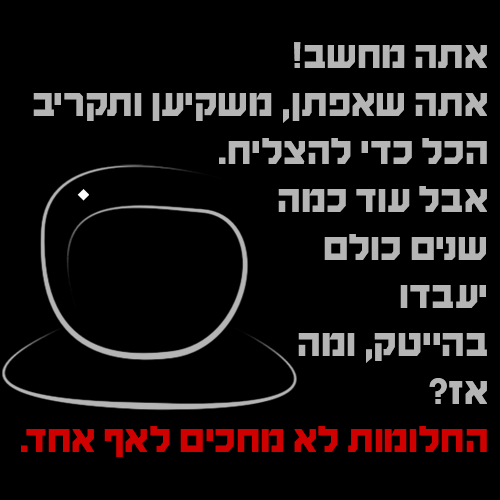
<style>
.page{position:relative;width:500px;height:500px;background:#000000}
.page>*{position:absolute;margin:0}
.t1{font:40px "HaimG-Regular";color:#b5b5b5}
.t2{font:40px "HaimG-Regular";color:#ce0000}
</style>
<div class="page">
<p class="t1" style="left:21px;top:42px;width:466px;height:415px">אתה מחשב!<br>אתה שאפתן, משקיען ותקריב <br>הכל כדי להצליח.<br>אבל עוד כמה <br>שנים כולם <br>יעבדו <br>בהייטק, ומה <br>אז? <br><span class="t2">החלומות לא מחכים לאף אחד.</span></p>
</div>
